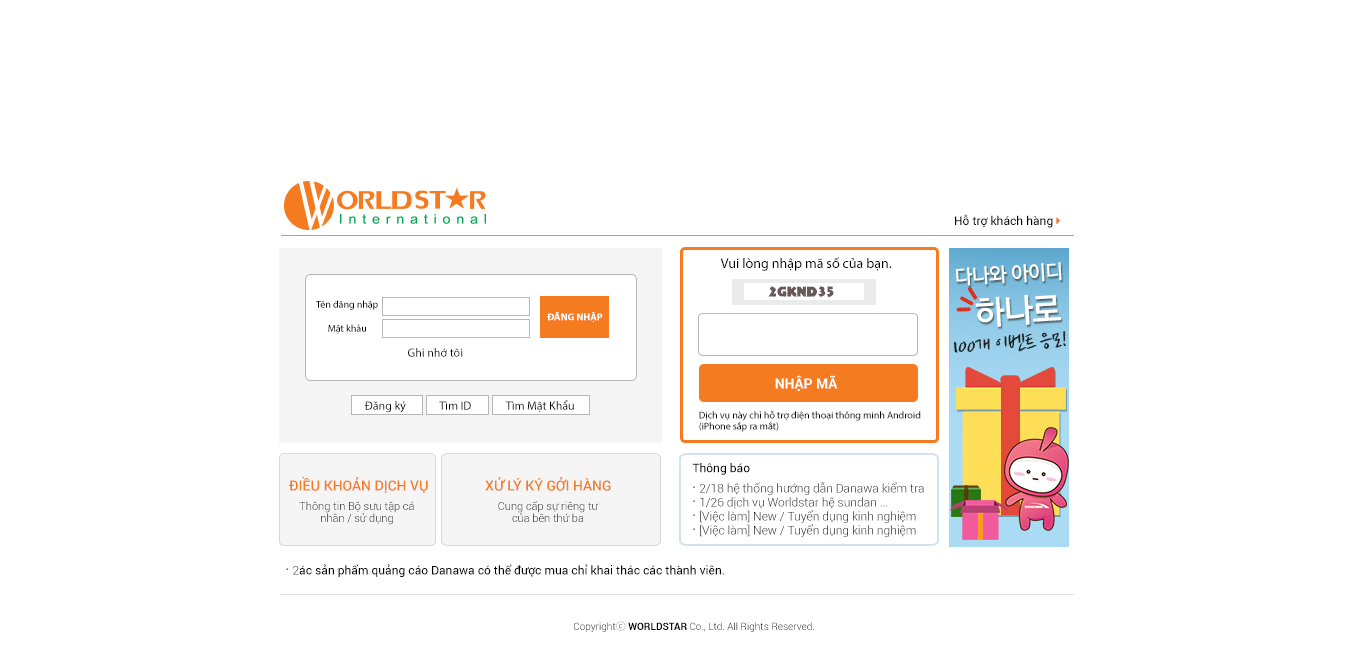
<style>
.page{position:relative;width:1366px;height:645px;background:#ffffff}
.page>*{position:absolute;margin:0}
.t1{font:14px "MyriadPro-Regular";color:#000000}
.t2{font:14px "Rockstone";color:#685858}
.t3{font:10px "MyriadPro-Regular";color:#000000}
.t4{font:10px "MyriadPro-Bold";color:#fffefe}
.t5{font:12px "MyriadPro-Regular";color:#000000}
.t6{font:14px "Roboto-Bold";color:#ffffff}
.t7{font:10px/11px "MyriadPro-Regular";color:#000000}
.t8{font:12px "Roboto-Regular";color:#000000}
.t9{font:14px "Roboto-Medium";color:#f57b20;text-transform:uppercase}
.t10{font:12px/14px "Roboto-Light";color:#000000}
.t11{font:14px/14px "Roboto-Black";color:#000000}
.t12{font:11px/12px "Roboto-Light"}
.t13{font:14px "Roboto-Black";color:#000000}
.t14{font:12px "Roboto-Light";color:#000000}
.t15{font:10px "Roboto-Light";color:#000000}
.t16{font:10px "KozGoPr6N-Regular";color:#000000}
.t17{font:10px "Roboto-Bold";color:#000000}
</style>
<div class="page">
<p class="t1" style="left:720px;top:257px;width:172px;height:14px">Vui lòng nhập mã số của bạn.</p>
<p class="t2" style="left:768px;top:286px;width:66px;height:12px">2GKND35</p>
<p class="t3" style="left:316px;top:300px;width:62px;height:10px">Tên đăng nhập</p>
<p class="t4" style="left:547px;top:312px;width:56px;height:11px">ĐĂNG NHẬP</p>
<p class="t3" style="left:328px;top:324px;width:38px;height:10px">Mật khảu</p>
<p class="t5" style="left:408px;top:348px;width:55px;height:9px">Ghi nhớ tôi</p>
<p class="t6" style="left:775px;top:375px;width:63px;height:16px">NHẬP MÃ</p>
<p class="t5" style="left:364px;top:401px;width:42px;height:12px">Đăng ký</p>
<p class="t5" style="left:439px;top:401px;width:32px;height:9px">Tìm ID</p>
<p class="t5" style="left:505px;top:400px;width:69px;height:12px">Tìm Mật Khẩu</p>
<p class="t7" style="left:699px;top:410px;width:222px;height:22px">Dịch vụ này chỉ hỗ trợ điện thoại thông minh Android <br>(iPhone sắp ra mắt)</p>
<p class="t8" style="left:692px;top:463px;width:58px;height:12px">Thông báo</p>
<p class="t9" style="left:289px;top:476px;width:139px;height:17px">Điều khoản Dịch vụ</p>
<p class="t9" style="left:485px;top:477px;width:126px;height:14px">xử lý ký gởi hàng</p>
<p class="t10" style="left:693px;top:482px;width:231px;height:55px"><span class="t11">.  </span>2/18 hệ thống hướng dẫn Danawa kiểm tra<br><span class="t11">.  </span>1/26 dịch vụ Worldstar hệ sundan ...<br><span class="t11">.  </span>[Việc làm] New / Tuyển dụng kinh nghiệm<br><span class="t11">.  </span>[Việc làm] New / Tuyển dụng kinh nghiệm</p>
<p class="t12" style="left:299px;top:501px;width:115px;height:24px;text-align:center">Thông tin Bộ sưu tập cá nhân / sử dụng</p>
<p class="t12" style="left:498px;top:501px;width:101px;height:21px;text-align:center">Cung cấp sự riêng tư của bên thứ ba</p>
<p class="t8" style="left:286px;top:564px;width:438px;height:13px"><span class="t13">.  </span><span class="t14">2</span>ác sản phẩm quảng cáo Danawa có thể được mua chỉ khai thác các thành viên.</p>
<p class="t15" style="left:574px;top:621px;width:240px;height:11px">Copyright<span class="t16">ⓒ </span><span class="t17">WORLDSTAR</span> Co., Ltd. All Rights Reserved.</p>
</div>
